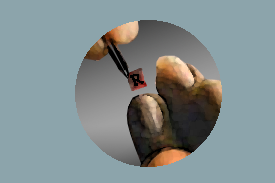
<style>
.page{position:relative;width:275px;height:183px;background:#8ca4ab}
.page>*{position:absolute;margin:0}
.t1{font:16px "Times-Roman";color:#000000;font-weight:bold}
</style>
<div class="page">
<p class="t1" style="left:130px;top:74px;width:14px;height:12px;rotate:-21deg">R</p>
</div>
